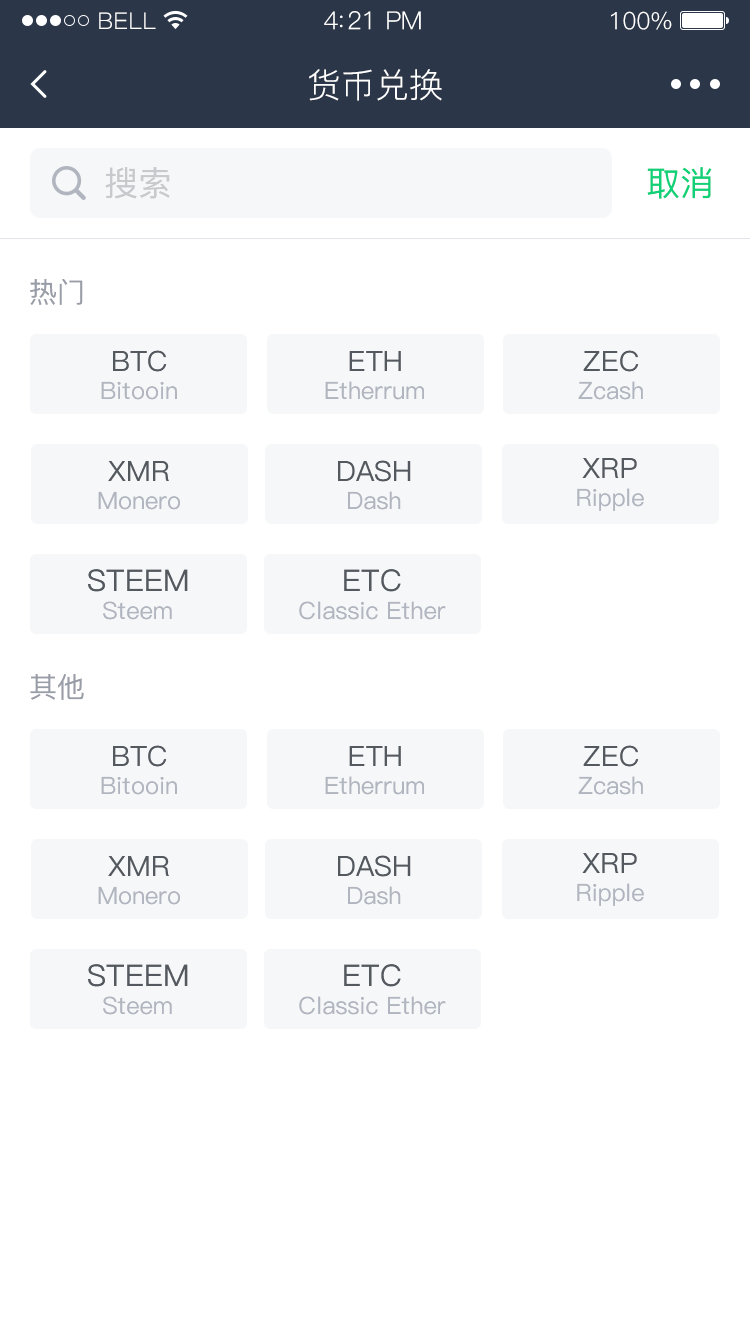
<style>
.page{position:relative;width:750px;height:1334px;background:#ffffff}
.page>*{position:absolute;margin:0}
.t1{font:23px "PingFang-SC-Regular";letter-spacing:0.02em;color:#ffffff}
.t2{font:25px "PingFang-SC-Regular";letter-spacing:-0.02em;color:#ffffff}
.t3{font:24px "PingFang-SC-Regular";letter-spacing:-0.02em;color:#ffffff}
.t4{font:34px "PingFang-SC-Regular";color:#ffffff}
.t5{font:34px "PingFang-SC-Medium";color:#c7c9cd}
.t6{font:34px "PingFang-SC-Medium";color:#10d078}
.t7{font:28px "PingFang-SC-Medium";color:#999da7}
.t8{font:24px/28px "PingFang-SC-Medium";color:#b1b5bf}
.t9{font:28px/28px "PingFang-SC-Medium";color:#545960}
.t10{font:30px/28px "PingFang-SC-Medium";color:#545960}
</style>
<div class="page">
<p class="t1" style="left:99px;top:12px;width:57px;height:17px">BELL</p>
<p class="t2" style="left:324px;top:11px;width:97px;height:19px">4:21 PM</p>
<p class="t3" style="left:611px;top:11px;width:61px;height:19px">100%</p>
<p class="t4" style="left:309px;top:69px;width:133px;height:32px">货币兑换</p>
<p class="t5" style="left:105px;top:167px;width:65px;height:32px">搜索</p>
<p class="t6" style="left:647px;top:167px;width:65px;height:32px">取消</p>
<p class="t7" style="left:30px;top:279px;width:53px;height:26px">热门</p>
<p class="t8" style="left:101px;top:350px;width:76px;height:50px;text-align:center"><span class="t9">BTC<br></span>Bitooin</p>
<p class="t8" style="left:325px;top:351px;width:99px;height:49px;text-align:center"><span class="t9">ETH<br></span>Etherrum</p>
<p class="t8" style="left:578px;top:350px;width:65px;height:50px;text-align:center"><span class="t9">ZEC<br></span>Zcash</p>
<p class="t8" style="left:98px;top:461px;width:82px;height:49px;text-align:center"><span class="t9">XMR<br></span>Monero</p>
<p class="t9" style="left:338px;top:460px;width:73px;height:50px;text-align:center">DASH<br><span class="t8">Dash</span></p>
<p class="t8" style="left:577px;top:458px;width:67px;height:53px;text-align:center"><span class="t9">XRP<br></span>Ripple</p>
<p class="t10" style="left:88px;top:569px;width:100px;height:51px;text-align:center">STEEM<br><span class="t8">Steem</span></p>
<p class="t8" style="left:299px;top:569px;width:147px;height:51px;text-align:center"><span class="t10">ETC<br></span>Classic Ether</p>
<p class="t7" style="left:30px;top:674px;width:54px;height:26px">其他</p>
<p class="t8" style="left:101px;top:745px;width:76px;height:50px;text-align:center"><span class="t9">BTC<br></span>Bitooin</p>
<p class="t8" style="left:325px;top:746px;width:99px;height:49px;text-align:center"><span class="t9">ETH<br></span>Etherrum</p>
<p class="t8" style="left:578px;top:745px;width:65px;height:50px;text-align:center"><span class="t9">ZEC<br></span>Zcash</p>
<p class="t8" style="left:98px;top:856px;width:82px;height:49px;text-align:center"><span class="t9">XMR<br></span>Monero</p>
<p class="t9" style="left:338px;top:855px;width:73px;height:50px;text-align:center">DASH<br><span class="t8">Dash</span></p>
<p class="t8" style="left:577px;top:853px;width:67px;height:53px;text-align:center"><span class="t9">XRP<br></span>Ripple</p>
<p class="t10" style="left:88px;top:964px;width:100px;height:51px;text-align:center">STEEM<br><span class="t8">Steem</span></p>
<p class="t8" style="left:299px;top:964px;width:147px;height:51px;text-align:center"><span class="t10">ETC<br></span>Classic Ether</p>
</div>
